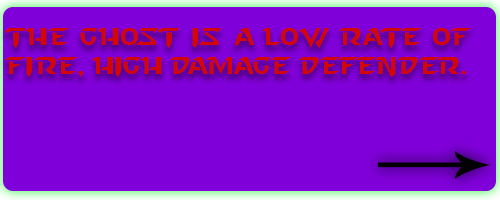
<style>
.page{position:relative;width:500px;height:200px;background:#8000d9}
.page>*{position:absolute;margin:0}
.t1{font:24px "StarcraftNormal";color:#d20606}
</style>
<div class="page">
<p class="t1" style="left:5px;top:28px;width:467px;height:49px">The ghost is a low rate of fire, high damage defender.</p>
</div>
